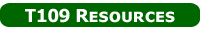
<style>
.page{position:relative;width:200px;height:30px;background:#006600}
.page>*{position:absolute;margin:0}
.t1{font:17.9px "TahomaSmallCap-Bold";color:#ffffff}
</style>
<div class="page">
<p class="t1" style="left:25px;top:8px;width:150px;height:15px">T109 Resources</p>
</div>
